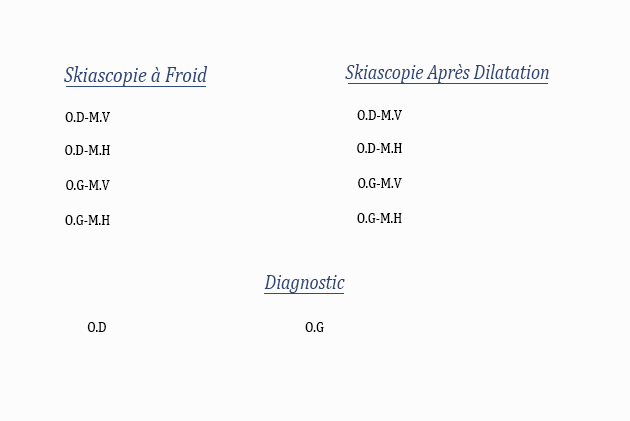
<style>
.page{position:relative;width:630px;height:421px;background:#fcfcfc}
.page>*{position:absolute;margin:0}
.t1{font:20.5px "Cambria-Italic";color:#2c4476;scale:0.88 1}
.t2{font:21.7px "Cambria-Italic";color:#2c4476;scale:0.88 1}
.t3{font:14.8px "Cambria";color:#000000;scale:0.88 1}
.t4{font:14.8px "Cambria";color:#030303;scale:0.88 1}
</style>
<div class="page">
<p class="t1" style="left:345px;top:64px;width:204px;height:19px">Skiascopie Après Dilatation</p>
<p class="t2" style="left:64px;top:66px;width:144px;height:21px">Skiascopie à Froid</p>
<p class="t3" style="left:65px;top:112px;width:45px;height:10px">O.D-M.V</p>
<p class="t3" style="left:357px;top:110px;width:45px;height:10px">O.D-M.V</p>
<p class="t3" style="left:65px;top:145px;width:45px;height:10px">O.D-M.H</p>
<p class="t3" style="left:357px;top:143px;width:45px;height:10px">O.D-M.H</p>
<p class="t3" style="left:66px;top:180px;width:44px;height:10px">O.G-M.V</p>
<p class="t3" style="left:358px;top:178px;width:44px;height:10px">O.G-M.V</p>
<p class="t3" style="left:65px;top:215px;width:45px;height:10px">O.G-M.H</p>
<p class="t3" style="left:357px;top:213px;width:45px;height:10px">O.G-M.H</p>
<p class="t1" style="left:264px;top:275px;width:81px;height:18px">Diagnostic</p>
<p class="t4" style="left:87px;top:322px;width:19px;height:10px">O.D</p>
<p class="t4" style="left:305px;top:322px;width:19px;height:10px">O.G</p>
</div>
